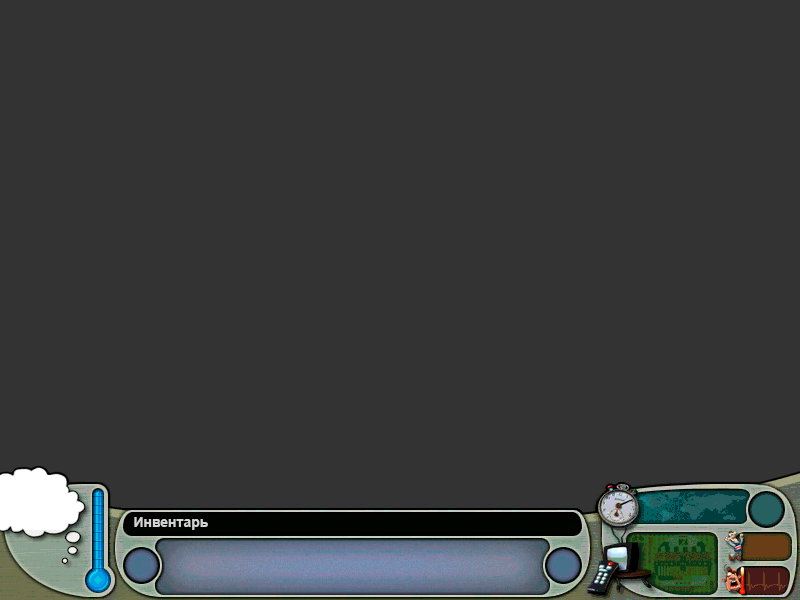
<style>
.page{position:relative;width:800px;height:600px;background:#333333}
.page>*{position:absolute;margin:0}
.t1{font:14px "Arial-BoldMT";color:#d3d3d3}
</style>
<div class="page">
<p class="t1" style="left:134px;top:517px;width:74px;height:13px">Инвентарь</p>
</div>
